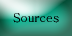
<style>
.page{position:relative;width:72px;height:36px}
.page>*{position:absolute;margin:0}
.t1{font:12px "Batang";color:#000000}
</style>
<div class="page">
<p class="t1" style="left:13px;top:13px;width:46px;height:10px">Sources</p>
</div>
